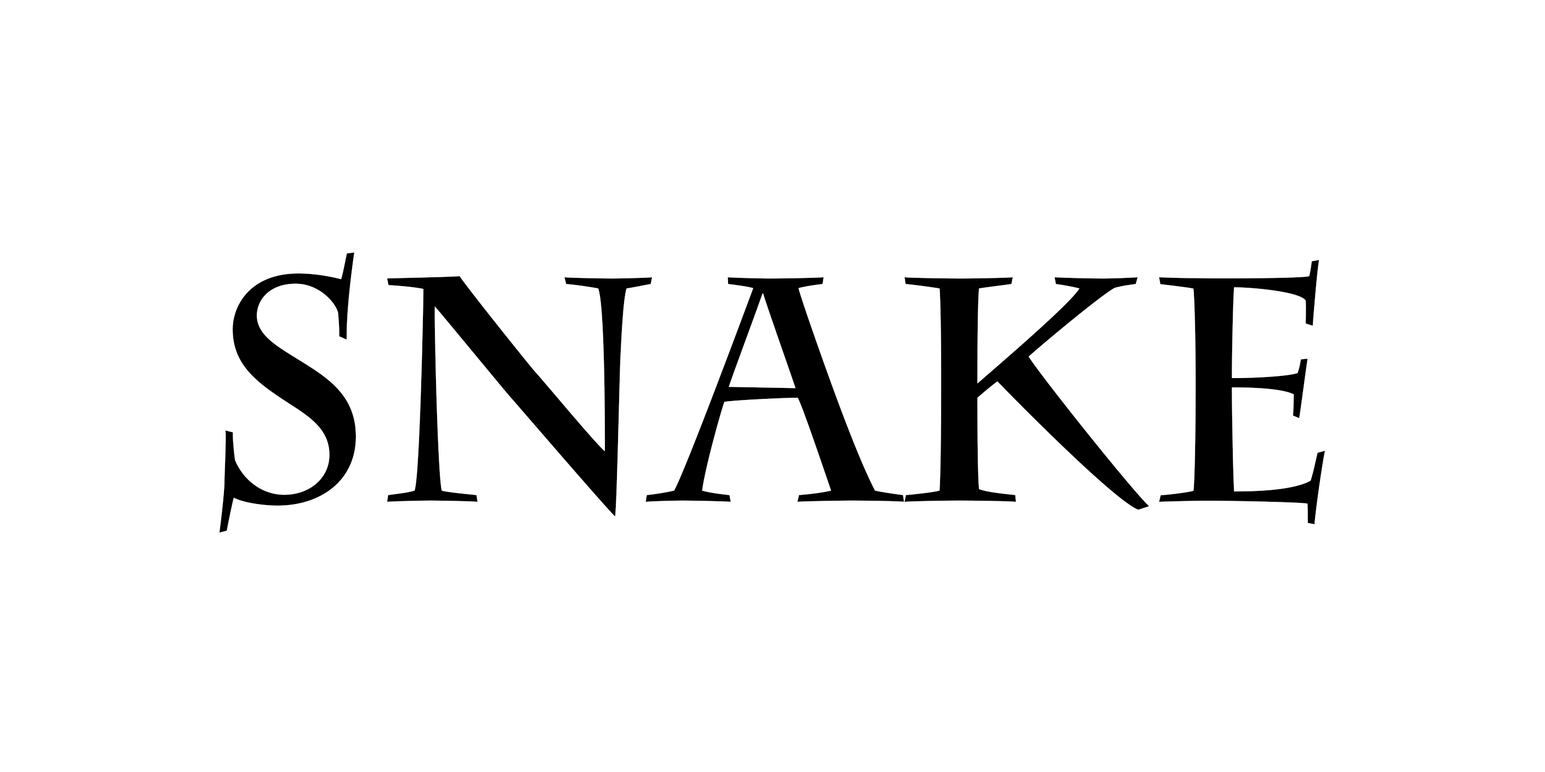
<style>
.page{position:relative;width:1545px;height:772px;background:#ffffff}
.page>*{position:absolute;margin:0}
.t1{font:317.8px "CharlemagneStd-Bold";color:#000000}
</style>
<div class="page">
<p class="t1" style="left:219px;top:252px;width:1106px;height:281px">SNAKE</p>
</div>
